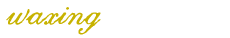
<style>
.page{position:relative;width:230px;height:38px;background:#ffffff}
.page>*{position:absolute;margin:0}
.t1{font:30px "ArchiveRoundhandScript";color:#c7b200}
</style>
<div class="page">
<p class="t1" style="left:6px;top:7px;width:95px;height:28px">waxing</p>
</div>
